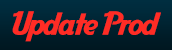
<style>
.page{position:relative;width:172px;height:50px}
.page>*{position:absolute;margin:0}
.t1{font:31.3px "AardvarkCafe";letter-spacing:-0.04em;color:#ff2c25;scale:1.15 1}
</style>
<div class="page">
<p class="t1" style="left:12px;top:11px;width:149px;height:31px">Update Prod</p>
</div>
